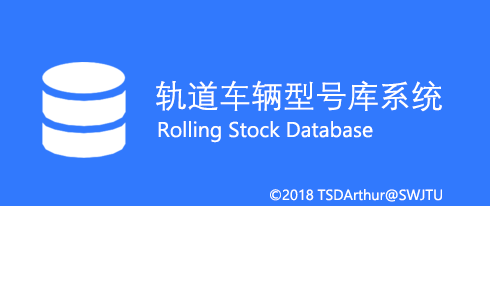
<style>
.page{position:relative;width:490px;height:290px;background:#3179fd}
.page>*{position:absolute;margin:0}
.t1{font:32px "DengXian-Regular";color:#ffffff}
.t2{font:21.3px "Ebrima";color:#ffffff}
.t3{font:14.7px "Ebrima";color:#ffffff}
</style>
<div class="page">
<p class="t1" style="left:156px;top:80px;width:286px;height:32px">轨道车辆型号库系统</p>
<p class="t2" style="left:158px;top:121px;width:215px;height:22px">Rolling Stock Database</p>
<p class="t3" style="left:270px;top:189px;width:172px;height:13px">©2018 TSDArthur@SWJTU</p>
</div>
